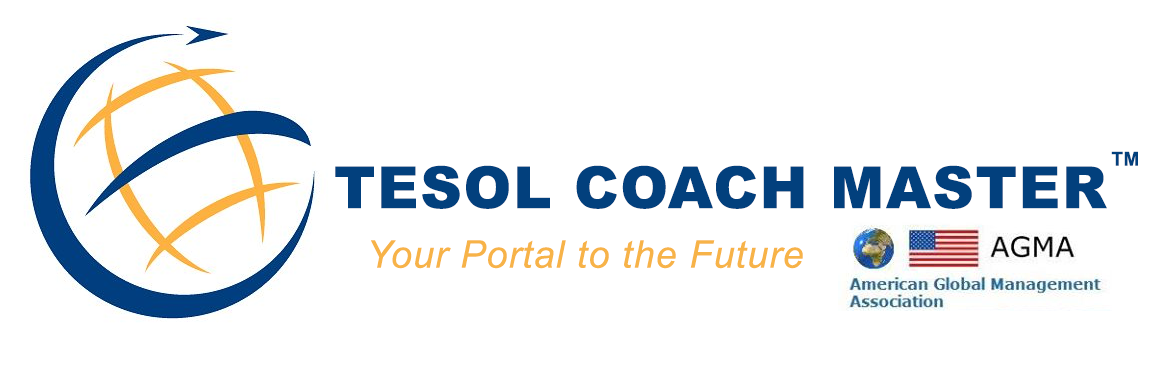
<style>
.page{position:relative;width:1172px;height:368px;background:#ffffff}
.page>*{position:absolute;margin:0}
.t1{font:19px "Arial-BoldMT";letter-spacing:0.03em;color:#02407d}
.t2{font:58px "Arial-Black";letter-spacing:0.03em;color:#02407d}
.t3{font:38px "Arial-ItalicMT";letter-spacing:0.03em;color:#f7b348}
</style>
<div class="page">
<p class="t1" style="left:1111px;top:151px;width:27px;height:15px">TM</p>
<p class="t2" style="left:335px;top:165px;width:772px;height:44px">TESOL COACH MASTER</p>
<p class="t3" style="left:371px;top:240px;width:432px;height:29px">Your Portal to the Future</p>
</div>
